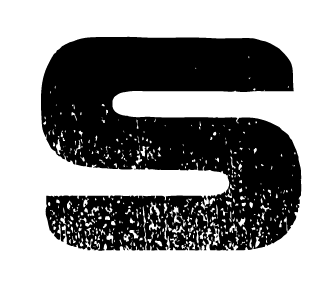
<style>
.page{position:relative;width:336px;height:299px;background:#ffffff}
.page>*{position:absolute;margin:0}
.t1{font:300px "Coalition";color:#000000}
</style>
<div class="page">
<p class="t1" style="left:41px;top:36px;width:261px;height:215px">S</p>
</div>
